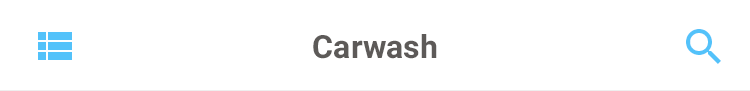
<style>
.page{position:relative;width:750px;height:91px;background:#ffffff}
.page>*{position:absolute;margin:0}
.t1{font:32px "Roboto-Bold";color:#5d5a58}
</style>
<div class="page">
<p class="t1" style="left:313px;top:34px;width:124px;height:25px">Carwash</p>
</div>
